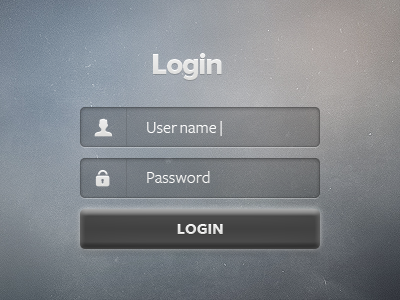
<style>
.page{position:relative;width:400px;height:300px}
.page>*{position:absolute;margin:0}
.t1{font:30px "ProximaNova-Extrabld";letter-spacing:-0.04em;color:#dddddb}
.t2{font:17px/50px "FreightSansBook";color:#ffffff}
.t3{font:16px "FreightSansBold";color:#e7e7e6}
</style>
<div class="page">
<p class="t1" style="left:153px;top:53px;width:69px;height:27px">Login</p>
<p class="t2" style="left:147px;top:121px;width:75px;height:62px">User name |<br>Password</p>
<p class="t3" style="left:177px;top:224px;width:46px;height:10px">LOGIN</p>
</div>
